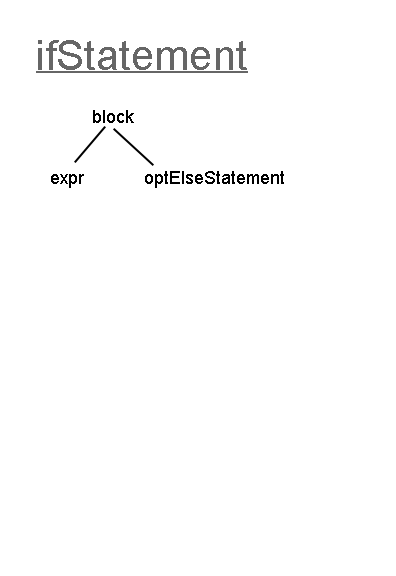
<style>
.page{position:relative;width:396px;height:576px;background:#ffffff}
.page>*{position:absolute;margin:0}
.t1{font:42px "ArialMT";color:#666666}
.t2{font:18px "ArialMT";color:#000000}
</style>
<div class="page">
<p class="t1" style="left:38px;top:40px;width:209px;height:30px">ifStatement</p>
<p class="t2" style="left:93px;top:110px;width:41px;height:13px">block</p>
<p class="t2" style="left:51px;top:174px;width:33px;height:14px">expr</p>
<p class="t2" style="left:145px;top:171px;width:139px;height:17px">optElseStatement</p>
</div>
